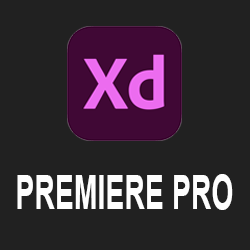
<style>
.page{position:relative;width:250px;height:250px;background:#212121}
.page>*{position:absolute;margin:0}
.t1{font:47.2px "Arial-BoldMT";color:#fefefe;scale:0.6 1}
</style>
<div class="page">
<p class="t1" style="left:17px;top:174px;width:216px;height:36px">PREMIERE PRO</p>
</div>
